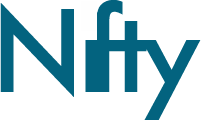
<style>
.page{position:relative;width:201px;height:120px;background:#ffffff}
.page>*{position:absolute;margin:0}
.t1{font:110px "Futura-Medium";letter-spacing:-0.05em;color:#046380}
</style>
<div class="page">
<p class="t1" style="left:0px;top:0px;width:201px;height:120px">Nifty</p>
</div>
